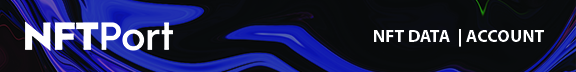
<style>
.page{position:relative;width:576px;height:72px}
.page>*{position:absolute;margin:0}
.t1{font:17.8px "MyriadPro-Bold";color:#ffffff}
</style>
<div class="page">
<p class="t1" style="left:374px;top:29px;width:170px;height:18px">NFT DATA  | ACCOUNT</p>
</div>
